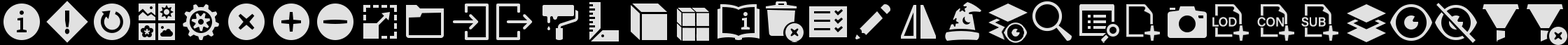
<style>
.page{position:relative;width:1568px;height:45px;background:#000000}
.page>*{position:absolute;margin:0}
.t1{font:12.6px "AcuminConcept-Medium";color:#e1e1e1;font-weight:bold}
</style>
<div class="page">
<p class="t1" style="left:1212px;top:17px;width:25px;height:10px">LOD</p>
<p class="t1" style="left:1257px;top:17px;width:27px;height:10px">CON</p>
<p class="t1" style="left:1301px;top:17px;width:25px;height:10px">SUB</p>
</div>
